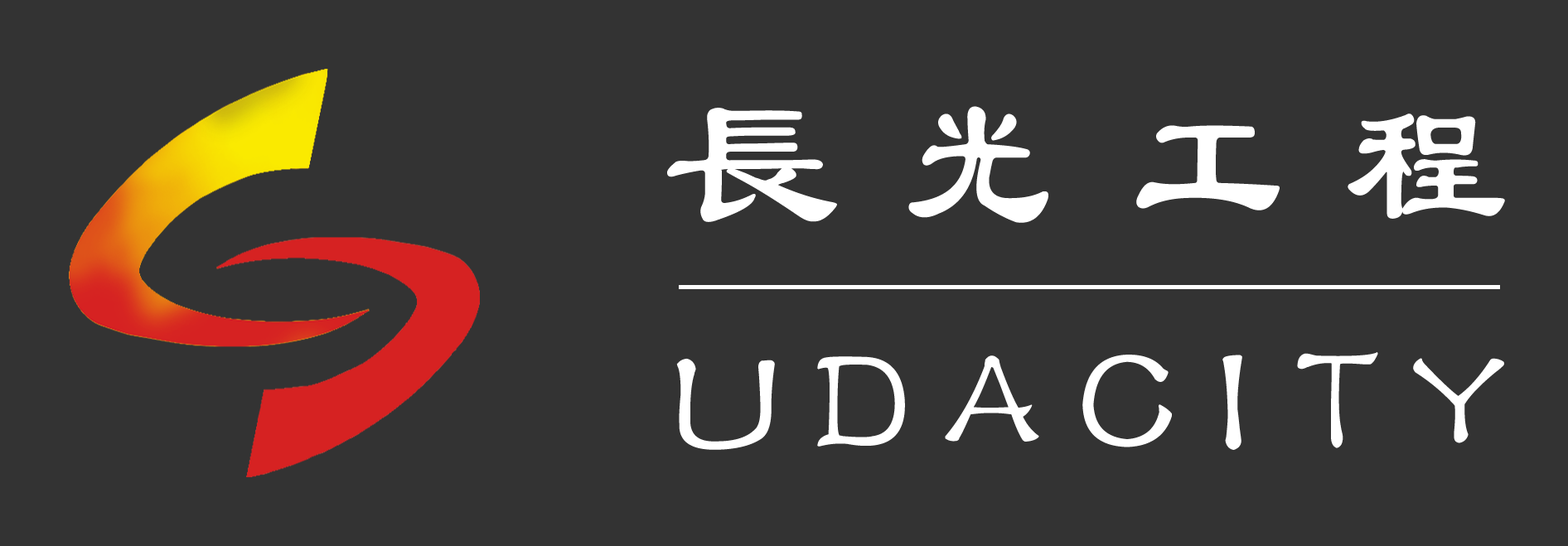
<style>
.page{position:relative;width:1568px;height:546px;background:#333333}
.page>*{position:absolute;margin:0}
.t1{font:186.1px "FZLSFW--GB1-0";color:#ffffff}
.t2{font:186px "FZLSFW--GB1-0";color:#ffffff;scale:0.78 1}
.t3{font:176.5px "FZLSFW--GB1-0";color:#ffffff;scale:0.93 1}
.t4{font:171.9px "FZLSFW--GB1-0";color:#ffffff;scale:0.88 1}
.t5{font:168.5px "FZLSFW--GB1-0";color:#ffffff;scale:0.71 1}
.t6{font:161.7px "FZLSFW--GB1-0";color:#ffffff;scale:1.07 1}
.t7{font:160.9px "FZLSFW--GB1-0";color:#ffffff;scale:0.93 1}
.t8{font:151.5px "FZLSFW--GB1-0";color:#ffffff;scale:0.96 1}
.t9{font:163.9px "FZLSFW--GB1-0";color:#ffffff;scale:0.93 1}
.t10{font:167.3px "FZLSFW--GB1-0";color:#ffffff;scale:1.14 1}
.t11{font:147.6px "FZLSFW--GB1-0";color:#ffffff}
</style>
<div class="page">
<p class="t1" style="left:667px;top:108px;width:170px;height:114px">长</p>
<p class="t2" style="left:908px;top:106px;width:140px;height:117px">光</p>
<p class="t3" style="left:1348px;top:114px;width:157px;height:105px">程</p>
<p class="t4" style="left:1136px;top:125px;width:144px;height:86px">工</p>
<p class="t5" style="left:1297px;top:352px;width:81px;height:96px">T</p>
<p class="t6" style="left:676px;top:358px;width:99px;height:92px">U</p>
<p class="t7" style="left:817px;top:356px;width:88px;height:91px">D</p>
<p class="t8" style="left:945px;top:356px;width:94px;height:86px">A</p>
<p class="t9" style="left:1082px;top:355px;width:90px;height:93px">C</p>
<p class="t10" style="left:1222px;top:355px;width:20px;height:95px">I</p>
<p class="t11" style="left:1413px;top:358px;width:91px;height:85px">Y</p>
</div>
